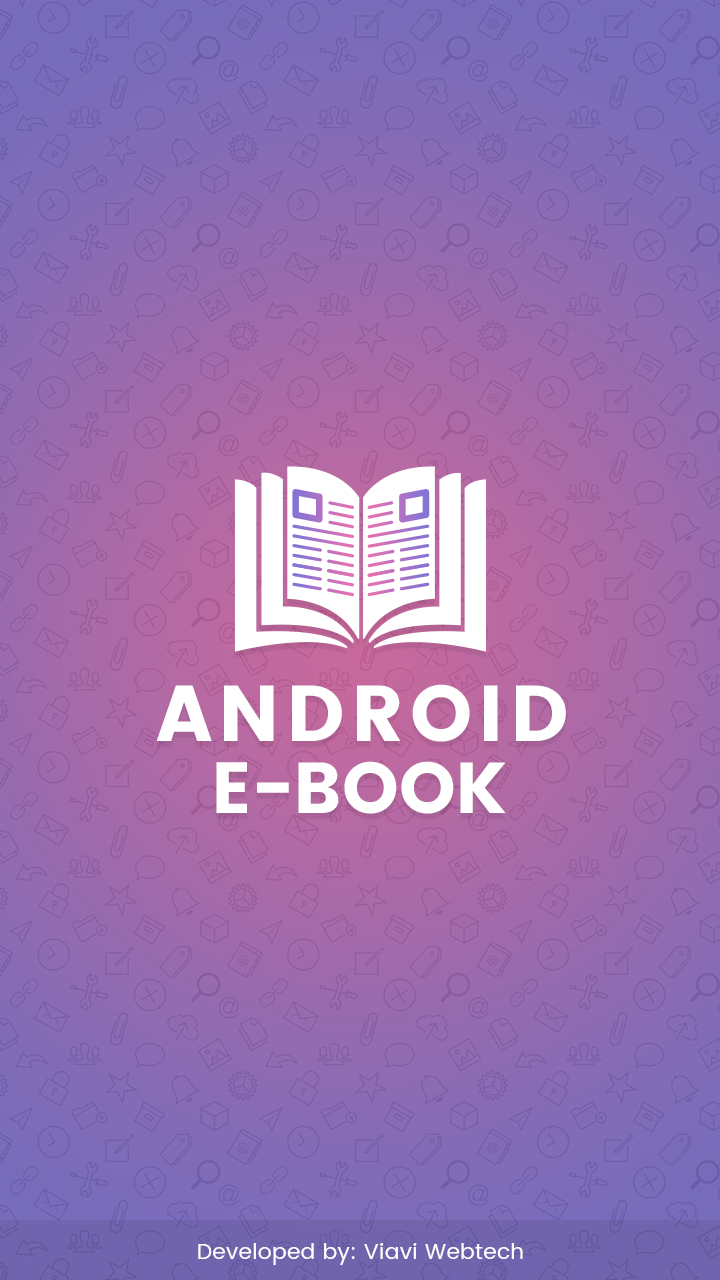
<style>
.page{position:relative;width:720px;height:1280px}
.page>*{position:absolute;margin:0}
.t1{font:79px "Poppins";letter-spacing:0.08em;color:#ffffff;text-transform:uppercase}
.t2{font:72px "Poppins";color:#ffffff;text-transform:uppercase}
.t3{font:21.7px "Poppins-Regular";letter-spacing:0.02em;color:#ffffff}
</style>
<div class="page">
<p class="t1" style="left:156px;top:684px;width:410px;height:58px">Android</p>
<p class="t2" style="left:216px;top:761px;width:290px;height:53px">E-Book</p>
<p class="t3" style="left:198px;top:1243px;width:325px;height:22px">Developed by: Viavi Webtech</p>
</div>
